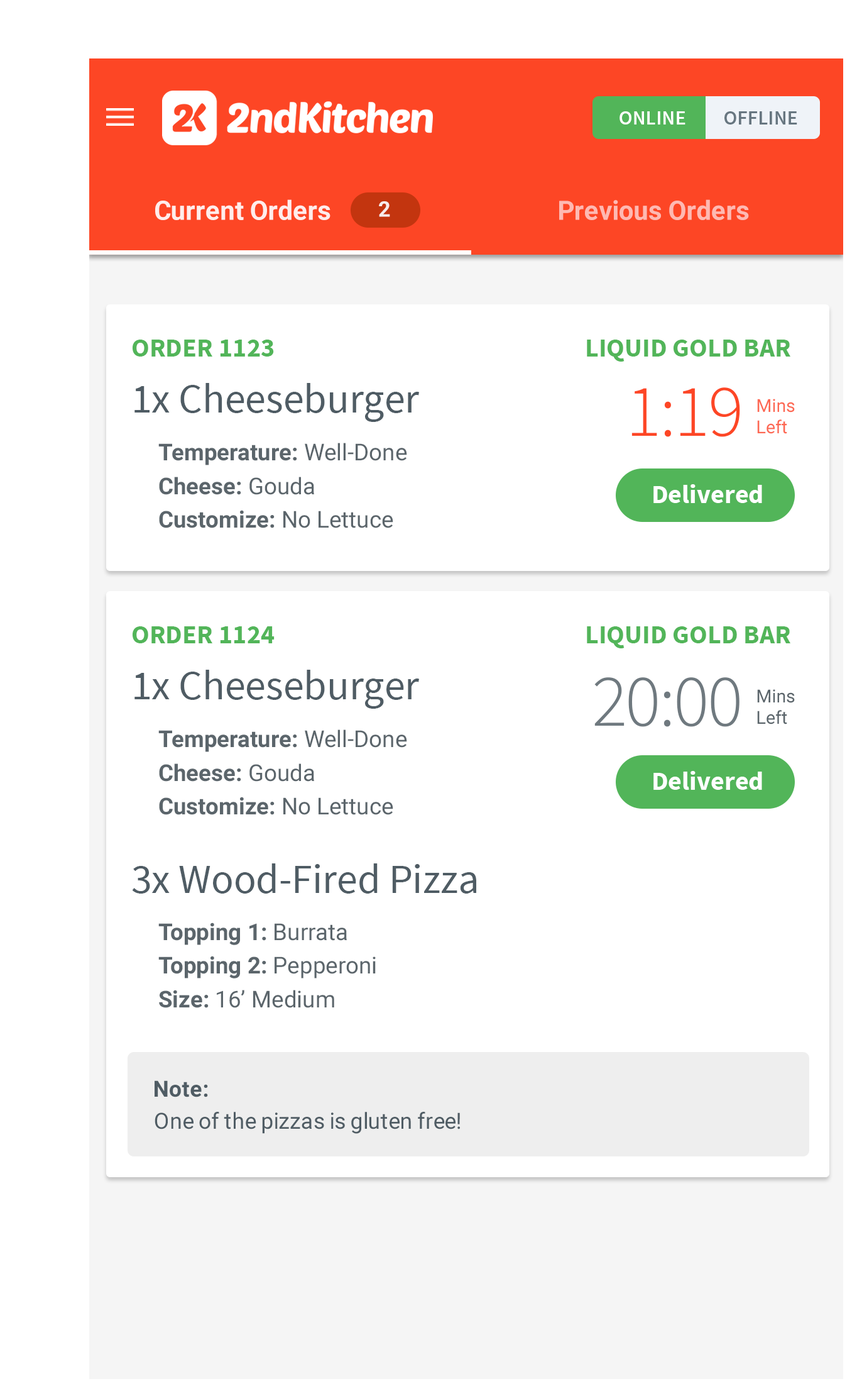
<style>
.page{position:relative;width:857px;height:1391px;background:#ffffff}
.page>*{position:absolute;margin:0}
.t1{font:26.5px "Roboto-Bold";color:#ffffff}
.t2{font:21.4px "Roboto-Bold";color:#ffffff}
.t3{font:26.5px "Roboto-Bold";color:#feb9b2}
.t4{font:26.5px "SourceSansPro-Bold";color:#52b559}
.t5{font:41.4px "SourceSansPro-Regular";color:#4f5c64}
.t6{font:74.4px "SourceSansPro-Light";letter-spacing:-0.025em;color:#fd4625}
.t7{font:17.9px/21px "Roboto-Regular";color:#fd6853}
.t8{font:23.2px/33.7px "Roboto-Bold";color:#5b656b}
.t9{font:23.2px/33.7px "Roboto-Regular";color:#5b656b}
.t10{font:26.5px "SourceSansPro-Bold";color:#ffffff}
.t11{font:74.4px "SourceSansPro-Light";letter-spacing:-0.025em;color:#6f797f}
.t12{font:17.9px/21px "Roboto-Regular";color:#5b656b}
.t13{font:22.4px/32px "Roboto-Regular";color:#4f5c64}
.t14{font:22.4px/32px "Roboto-Bold";color:#4f5c64}
</style>
<div class="page">
<p class="t1" style="left:155px;top:199px;width:176px;height:21px;opacity:0.87">Current Orders</p>
<p class="t2" style="left:379px;top:201px;width:11px;height:16px;opacity:0.87">2</p>
<p class="t3" style="left:560px;top:199px;width:189px;height:21px">Previous Orders</p>
<p class="t4" style="left:132px;top:339px;width:142px;height:17px">ORDER 1123</p>
<p class="t4" style="left:587px;top:339px;width:204px;height:22px">LIQUID GOLD BAR</p>
<p class="t5" style="left:135px;top:383px;width:285px;height:39px">1x Cheeseburger</p>
<p class="t6" style="left:632px;top:387px;width:109px;height:50px">1:19</p>
<p class="t7" style="left:758px;top:399px;width:37px;height:35px">Mins <br>Left</p>
<p class="t8" style="left:158px;top:443px;width:249px;height:85px">Temperature:<span class="t9"> Well-Done<br></span>Cheese:<span class="t9"> Gouda<br></span>Customize:<span class="t9"> No Lettuce</span></p>
<p class="t10" style="left:654px;top:484px;width:109px;height:19px">Delivered</p>
<p class="t4" style="left:132px;top:626px;width:143px;height:17px">ORDER 1124</p>
<p class="t4" style="left:587px;top:626px;width:204px;height:22px">LIQUID GOLD BAR</p>
<p class="t5" style="left:135px;top:670px;width:285px;height:39px">1x Cheeseburger</p>
<p class="t11" style="left:595px;top:677px;width:145px;height:50px">20:00</p>
<p class="t12" style="left:758px;top:689px;width:37px;height:35px">Mins <br>Left</p>
<p class="t8" style="left:158px;top:729px;width:249px;height:86px">Temperature:<span class="t9"> Well-Done<br></span>Cheese:<span class="t9"> Gouda<br></span>Customize:<span class="t9"> No Lettuce</span></p>
<p class="t10" style="left:654px;top:771px;width:109px;height:19px">Delivered</p>
<p class="t5" style="left:132px;top:863px;width:345px;height:30px">3x Wood-Fired Pizza</p>
<p class="t8" style="left:158px;top:922px;width:218px;height:86px">Topping 1:<span class="t9"> Burrata<br></span>Topping 2:<span class="t9"> Pepperoni<br></span>Size:<span class="t9"> 16’ Medium</span></p>
<p class="t13" style="left:155px;top:1080px;width:305px;height:53px"><span class="t14">Note:<br></span>One of the pizzas is gluten free!</p>
</div>
